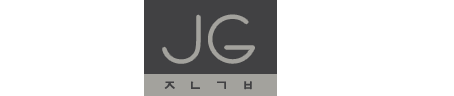
<style>
.page{position:relative;width:454px;height:96px;background:#ffffff}
.page>*{position:absolute;margin:0}
.t1{font:50px "BernhardFashion-BT";color:#a3a29d;font-weight:bold}
.t2{font:15px "ÈÞ¸ÕÁß°£ÆÔÃ¼";letter-spacing:0.71em;color:#414143;font-weight:bold}
.t3{font:50px "BernhardFashion-BT";color:#414143;font-weight:bold}
</style>
<div class="page">
<p class="t1" style="left:163px;top:15px;width:91px;height:48px">JG</p>
<p class="t2" style="left:164px;top:81px;width:88px;height:9px"><span class="t3"><br></span>ㅈㄴㄱㅂ</p>
</div>
